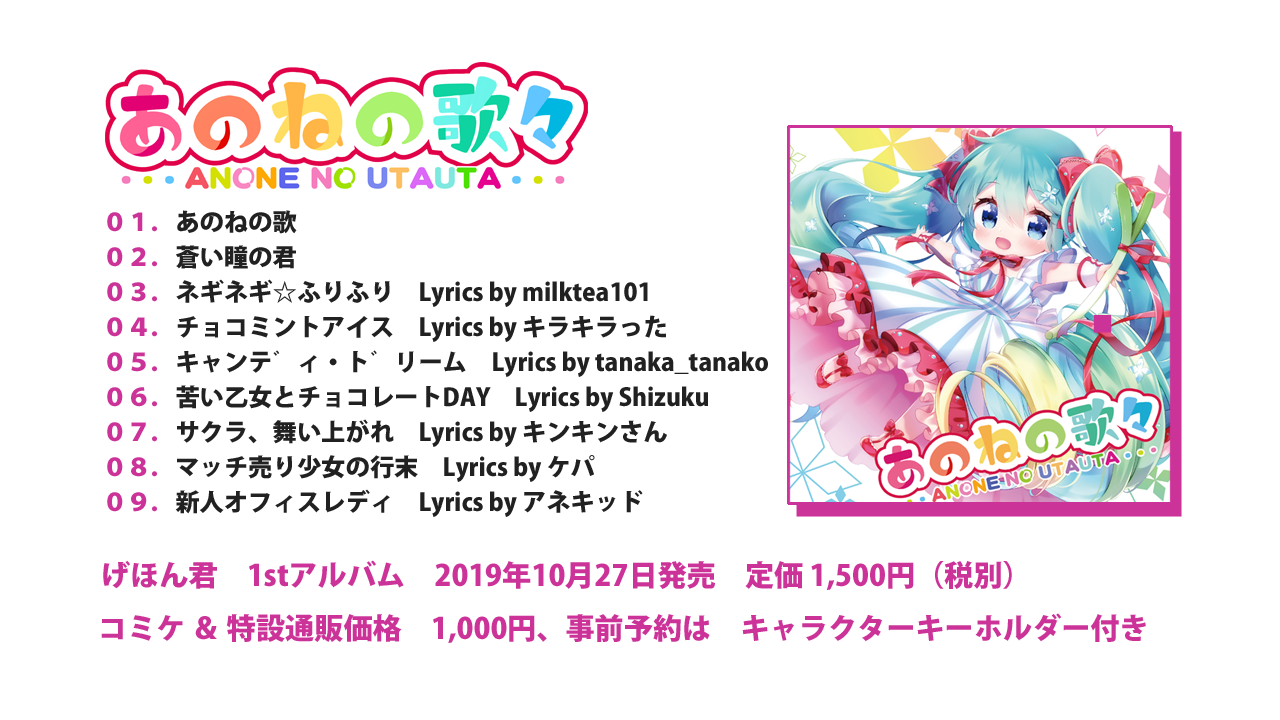
<style>
.page{position:relative;width:1280px;height:720px;background:#ffffff}
.page>*{position:absolute;margin:0}
.t1{font:24.3px "KozGoPr6N-Heavy";color:#212121}
.t2{font:24.3px "KozGoPr6N-Heavy";color:#cc3399}
.t3{font:29.2px "KozGoPr6N-Heavy";color:#cc3399}
</style>
<div class="page">
<p class="t1" style="left:107px;top:210px;width:190px;height:24px"><span class="t2">０１．</span>あのねの歌</p>
<p class="t1" style="left:107px;top:245px;width:189px;height:24px"><span class="t2">０２．</span>蒼い瞳の君</p>
<p class="t1" style="left:107px;top:279px;width:541px;height:28px"><span class="t2">０３．</span>ネギネギ☆ふりふり　Lyrics by milktea101</p>
<p class="t1" style="left:107px;top:315px;width:559px;height:27px"><span class="t2">０４．</span>チョコミントアイス　Lyrics by キラキラった</p>
<p class="t1" style="left:107px;top:350px;width:661px;height:27px"><span class="t2">０５．</span>キャンディ・ドリーム　Lyrics by tanaka_tanako</p>
<p class="t1" style="left:107px;top:385px;width:601px;height:27px"><span class="t2">０６．</span>苦い乙女とチョコレートDAY　Lyrics by Shizuku</p>
<p class="t1" style="left:107px;top:419px;width:560px;height:28px"><span class="t2">０７．</span>サクラ、舞い上がれ　Lyrics by キンキンさん</p>
<p class="t1" style="left:107px;top:455px;width:488px;height:27px"><span class="t2">０８．</span>マッチ売り少女の行末　Lyrics by ケパ</p>
<p class="t1" style="left:107px;top:489px;width:536px;height:28px"><span class="t2">０９．</span>新人オフィスレディ　Lyrics by アネキッド</p>
<p class="t3" style="left:103px;top:560px;width:909px;height:30px">げほん君　1stアルバム　2019年10月27日発売　定価 1,500円（税別）</p>
<p class="t3" style="left:101px;top:613px;width:1045px;height:30px">コミケ ＆ 特設通販価格　1,000円、事前予約は　キャラクターキーホルダー付き</p>
</div>
